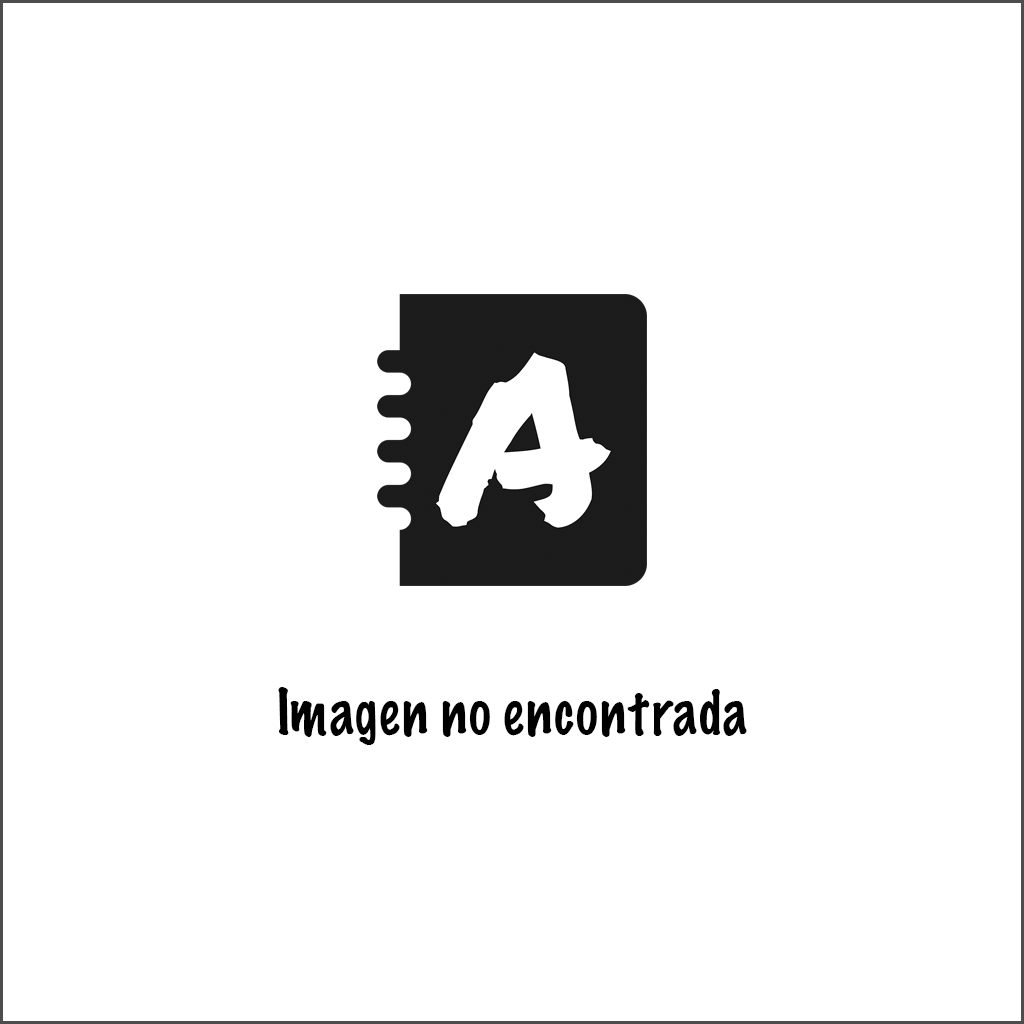
<style>
.page{position:relative;width:1024px;height:1024px;background:#ffffff}
.page>*{position:absolute;margin:0}
.t1{font:58.3px "MarkerFelt-Thin";color:#000000;scale:0.9 1}
</style>
<div class="page">
<p class="t1" style="left:278px;top:687px;width:469px;height:58px">Imagen no encontrada</p>
</div>
